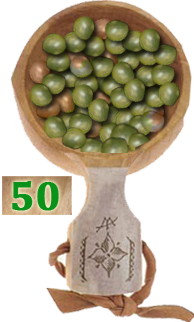
<style>
.page{position:relative;width:194px;height:322px;background:#ffffff}
.page>*{position:absolute;margin:0}
.t1{font:41.7px "Cambria-Bold";color:#0a921a;font-weight:bold}
</style>
<div class="page">
<p class="t1" style="left:12px;top:181px;width:47px;height:30px">50</p>
</div>
